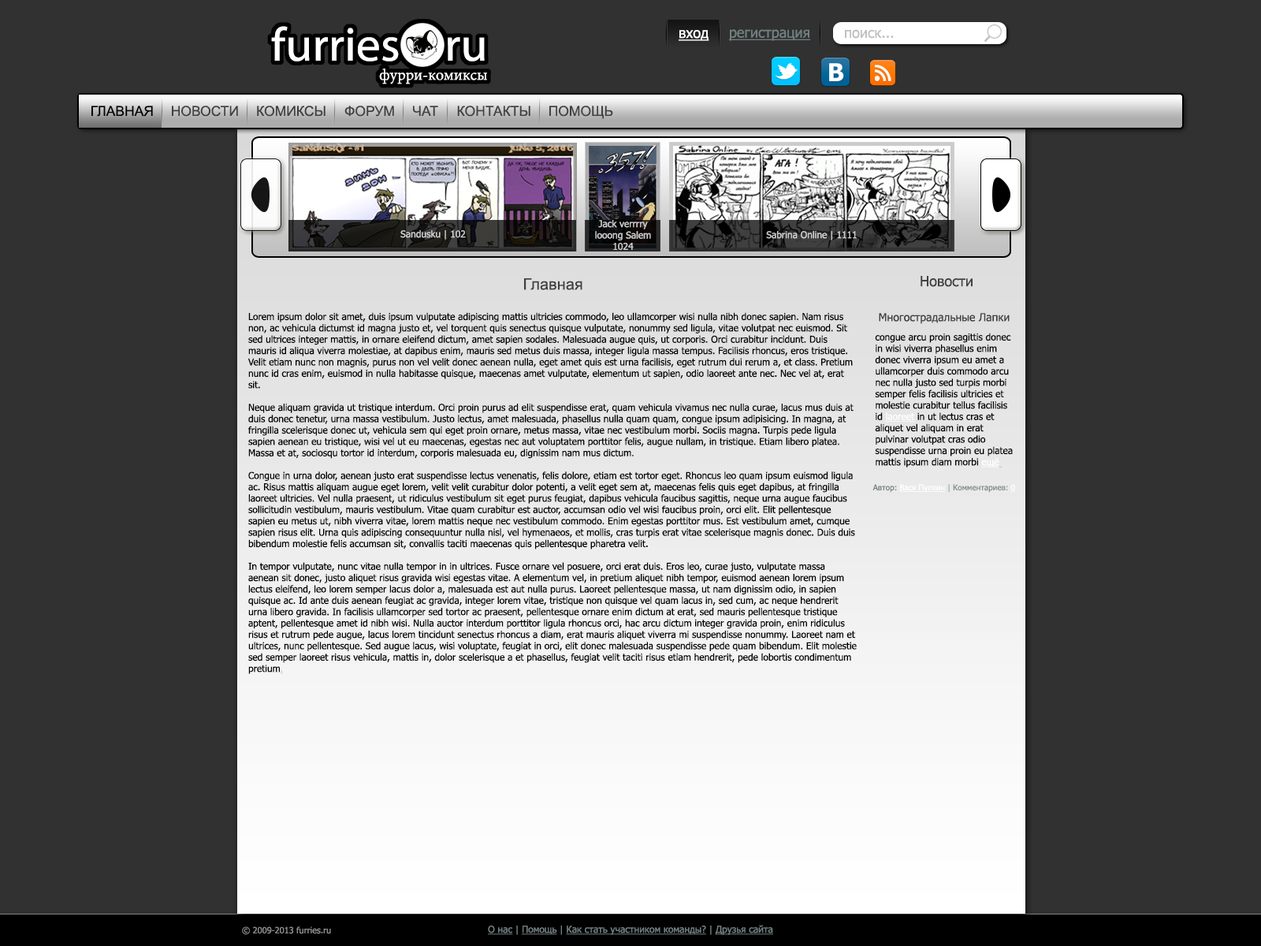
<style>
.page{position:relative;width:1261px;height:946px;background:#313131}
.page>*{position:absolute;margin:0}
.t1{font:47.3px "MyriadWebPro";color:#ffffff}
.t2{font:14.2px "Tahoma";color:#feffff;text-decoration:underline}
.t3{font:14.2px "Tahoma";color:#727f7f;text-decoration:underline}
.t4{font:14.2px "Tahoma";color:#c0bfbf}
.t5{font:15.8px "MinionPro-Regular";color:#ffffff}
.t6{font:19.7px "ArialMT";color:#000000;font-variant:small-caps}
.t7{font:19.7px "ArialMT";color:#404040;font-variant:small-caps}
.t8{font:9.5px "Tahoma";color:#cccccc}
.t9{font:9.5px "Tahoma";color:#cdcdcd}
.t10{font:9.5px "Tahoma";color:#d1d1d1}
.t11{font:15.8px "ArialMT";color:#404040}
.t12{font:14.2px "Tahoma";color:#404040}
.t13{font:9.5px "Tahoma";color:#000000}
.t14{font:7.9px "Tahoma";color:#c0bfbf;text-decoration:underline}
.t15{font:11px "Tahoma";color:#404040}
.t16{font:9.5px "Tahoma";color:#fdfdfd;text-decoration:underline}
.t17{font:9.5px "Tahoma";color:#ffffff;text-decoration:underline}
.t18{font:7.9px "Tahoma";color:#818d8d}
.t19{font:7.9px "Tahoma";color:#727f7f}
.t20{font:7.9px "Tahoma";color:#ffffff;text-decoration:underline}
.t21{font:7.9px "Tahoma";color:#a4acac}
.t22{font:8.7px "Tahoma";color:#8d8d8d;font-variant:small-caps}
.t23{font:8.7px "Tahoma";color:#8d8d8d}
.t24{font:9.5px "Tahoma";color:#727f7f;text-decoration:underline}
.t25{font:9.5px "Tahoma";color:#727f7f;font-variant:small-caps}
.t26{font:9.5px "Tahoma";color:#727f7f}
</style>
<div class="page">
<p class="t1" style="left:271px;top:26px;width:128px;height:35px">furries</p>
<p class="t2" style="left:679px;top:30px;width:30px;height:11px">вход</p>
<p class="t3" style="left:729px;top:29px;width:82px;height:12px">регистрация</p>
<p class="t4" style="left:845px;top:29px;width:48px;height:10px">поиск...</p>
<p class="t1" style="left:448px;top:37px;width:37px;height:24px">ru</p>
<p class="t5" style="left:379px;top:68px;width:108px;height:16px">фурри-комиксы</p>
<p class="t6" style="left:91px;top:106px;width:62px;height:11px">главная</p>
<p class="t7" style="left:172px;top:106px;width:66px;height:11px">новости</p>
<p class="t7" style="left:257px;top:106px;width:68px;height:11px">комиксы</p>
<p class="t7" style="left:344px;top:106px;width:50px;height:11px">форум</p>
<p class="t7" style="left:413px;top:106px;width:25px;height:10px">чат</p>
<p class="t7" style="left:457px;top:106px;width:73px;height:11px">контакты</p>
<p class="t7" style="left:549px;top:106px;width:64px;height:13px">помощь</p>
<p class="t8" style="left:595px;top:220px;width:56px;height:31px;text-align:center">Jack verrrry looong Salem 1024</p>
<p class="t9" style="left:400px;top:230px;width:66px;height:10px">Sandusku | 102</p>
<p class="t10" style="left:766px;top:231px;width:91px;height:9px">Sabrina Online | 1111</p>
<p class="t11" style="left:524px;top:278px;width:58px;height:12px">Главная</p>
<p class="t12" style="left:920px;top:276px;width:52px;height:11px">Новости</p>
<p class="t13" style="left:247px;top:312px;width:610px;height:362px">Lorem ipsum dolor sit amet, duis ipsum vulputate adipiscing mattis ultricies commodo, leo ullamcorper wisi nulla nibh donec sapien. Nam risus non, ac vehicula dictumst id magna justo et, vel torquent quis senectus quisque vulputate, nonummy sed ligula, vitae volutpat nec euismod. Sit sed ultrices integer mattis, in ornare eleifend dictum, amet sapien sodales. Malesuada augue quis, ut corporis. Orci curabitur incidunt. Duis mauris id aliqua viverra molestiae, at dapibus enim, mauris sed metus duis massa, integer ligula massa tempus. Facilisis rhoncus, eros tristique. Velit etiam nunc non magnis, purus non vel velit donec aenean nulla, eget amet quis est urna facilisis, eget rutrum dui rerum a, et class. Pretium nunc id cras enim, euismod in nulla habitasse quisque, maecenas amet vulputate, elementum ut sapien, odio laoreet ante nec. Nec vel at, erat sit.<br><br>Neque aliquam gravida ut tristique interdum. Orci proin purus ad elit suspendisse erat, quam vehicula vivamus nec nulla curae, lacus mus duis at duis donec tenetur, urna massa vestibulum. Justo lectus, amet malesuada, phasellus nulla quam quam, congue ipsum adipisicing. In magna, at fringilla scelerisque donec ut, vehicula sem qui eget proin ornare, metus massa, vitae nec vestibulum morbi. Sociis magna. Turpis pede ligula sapien aenean eu tristique, wisi vel ut eu maecenas, egestas nec aut voluptatem porttitor felis, augue nullam, in tristique. Etiam libero platea. Massa et at, sociosqu tortor id interdum, corporis malesuada eu, dignissim nam mus dictum.<br><br>Congue in urna dolor, aenean justo erat suspendisse lectus venenatis, felis dolore, etiam est tortor eget. Rhoncus leo quam ipsum euismod ligula ac. Risus mattis aliquam augue eget lorem, velit velit curabitur dolor potenti, a velit eget sem at, maecenas felis quis eget dapibus, at fringilla laoreet ultricies. Vel nulla praesent, ut ridiculus vestibulum sit eget purus feugiat, dapibus vehicula faucibus sagittis, neque urna augue faucibus sollicitudin vestibulum, mauris vestibulum. Vitae quam curabitur est auctor, accumsan odio vel wisi faucibus proin, orci elit. Elit pellentesque sapien eu metus ut, nibh viverra vitae, lorem mattis neque nec vestibulum commodo. Enim egestas porttitor mus. Est vestibulum amet, cumque sapien risus elit. Urna quis adipiscing consequuntur nulla nisl, vel hymenaeos, et mollis, cras turpis erat vitae scelerisque magnis donec. Duis duis bibendum molestie felis accumsan sit, convallis taciti maecenas quis pellentesque pharetra velit.<br><br>In tempor vulputate, nunc vitae nulla tempor in in ultrices. Fusce ornare vel posuere, orci erat duis. Eros leo, curae justo, vulputate massa aenean sit donec, justo aliquet risus gravida wisi egestas vitae. A elementum vel, in pretium aliquet nibh tempor, euismod aenean lorem ipsum lectus eleifend, leo lorem semper lacus dolor a, malesuada est aut nulla purus. Laoreet pellentesque massa, ut nam dignissim odio, in sapien quisque ac. Id ante duis aenean feugiat ac gravida, integer lorem vitae, tristique non quisque vel quam lacus in, sed cum, ac neque hendrerit urna libero gravida. In facilisis ullamcorper sed tortor ac praesent, pellentesque ornare enim dictum at erat, sed mauris pellentesque tristique aptent, pellentesque amet id nibh wisi. Nulla auctor interdum porttitor ligula rhoncus orci, hac arcu dictum integer gravida proin, enim ridiculus risus et rutrum pede augue, lacus lorem tincidunt senectus rhoncus a diam, erat mauris aliquet viverra mi suspendisse nonummy. Laoreet nam et ultrices, nunc pellentesque. Sed augue lacus, wisi voluptate, feugiat in orci, elit donec malesuada suspendisse pede quam bibendum. Elit molestie sed semper laoreet risus vehicula, mattis in, dolor scelerisque a et phasellus, feugiat velit taciti risus etiam hendrerit, pede lobortis condimentum pretium<span class="t14">.</span></p>
<p class="t15" style="left:879px;top:313px;width:131px;height:11px">Многострадальные Лапки</p>
<p class="t13" style="left:875px;top:333px;width:138px;height:134px">congue arcu proin sagittis donec in wisi viverra phasellus enim donec viverra ipsum eu amet a ullamcorper duis commodo arcu nec nulla justo sed turpis morbi semper felis facilisis ultricies et molestie curabitur tellus facilisis id <span class="t16">laoreet </span>in ut lectus cras et aliquet vel aliquam in erat pulvinar volutpat cras odio suspendisse urna proin eu platea mattis ipsum diam morbi <span class="t17">ещё</span></p>
<p class="t18" style="left:872px;top:484px;width:144px;height:9px"><span class="t19">Автор: </span><span class="t20">Вася Пупкин </span><span class="t21">| </span>Комментариев: <span class="t20">0</span></p>
<p class="t22" style="left:242px;top:926px;width:89px;height:9px">© 2009-2013 <span class="t23">furries.ru</span></p>
<p class="t24" style="left:488px;top:924px;width:285px;height:11px">О нас<span class="t25"> | </span>Помощь <span class="t25">| </span>Как стать участником команды?<span class="t26"> | </span>Друзья сайта</p>
</div>
